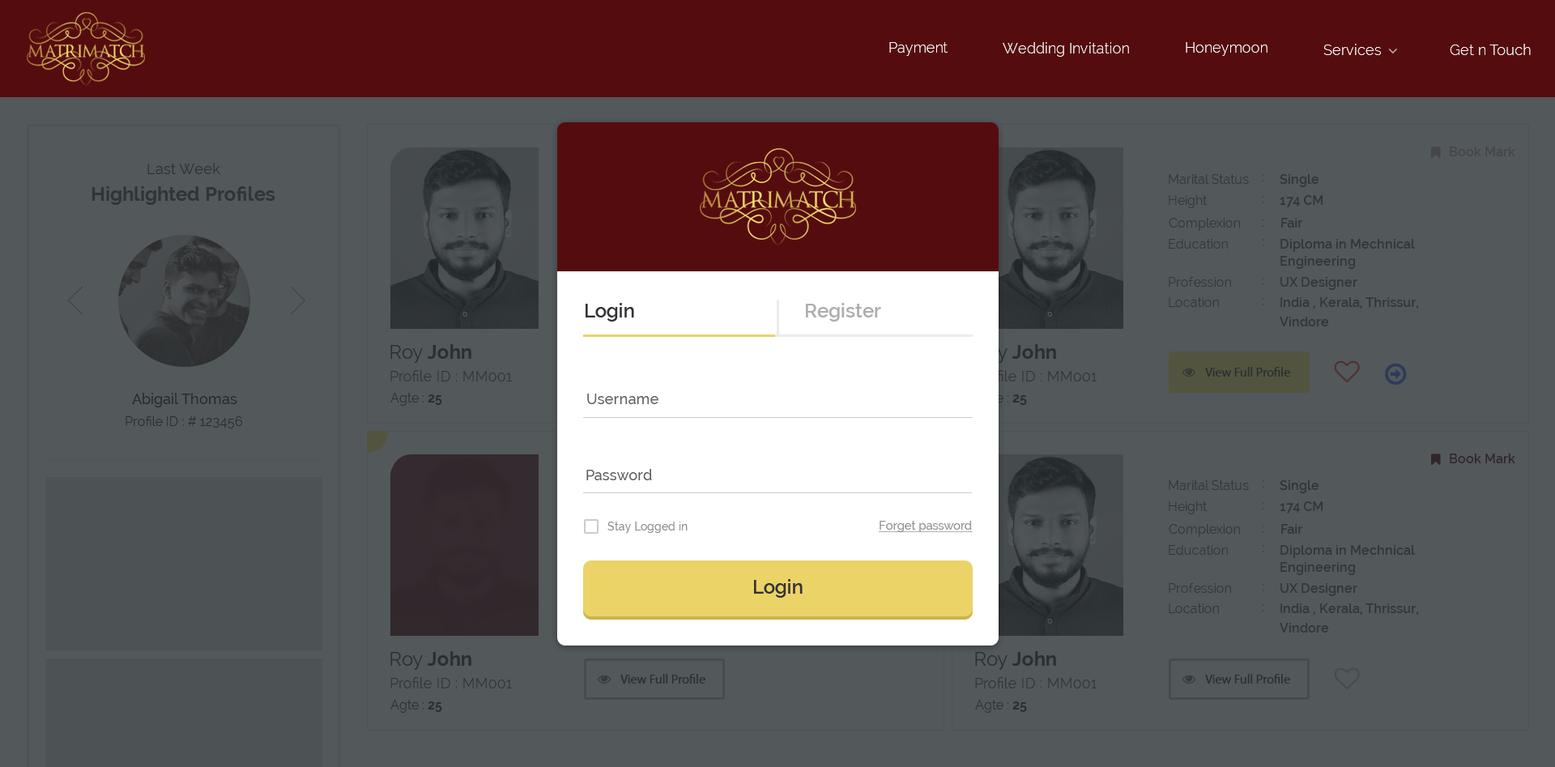
<style>
.page{position:relative;width:1555px;height:767px;background:#53585b}
.page>*{position:absolute;margin:0}
.t1{font:14.6px "Raleway-Light";color:#ffffff}
.t2{font:13px "Raleway-SemiBold";color:#444649}
.t3{font:14.6px "Raleway";color:#333333}
.t4{font:13px "Raleway";color:#313639}
.t5{font:13px "Raleway"}
.t6{font:13px "Raleway-SemiBold";color:#313639}
.t7{font:19.4px "Raleway-Bold";color:#303538}
.t8{font:13px/17px "Raleway-SemiBold";color:#313639}
.t9{font:19.4px "Raleway-SemiBold";color:#333333}
.t10{font:19.4px "Raleway-SemiBold";color:#adadad}
.t11{font:13px/19.4px "Raleway-SemiBold";color:#313639}
.t12{font:19.4px "Raleway-Bold";color:#333333}
.t13{font:19.4px "Raleway";color:#333333}
.t14{font:14.6px "Raleway";color:#313639}
.t15{font:13px "MyriadPro-Regular";color:#333333}
.t16{font:14.6px "Raleway-Medium";color:#202020}
.t17{font:13px "Raleway";color:#333333}
.t18{font:13px "Raleway-Bold";color:#333333}
.t19{font:14.6px "Raleway-Medium";color:#606060}
.t20{font:13px "Raleway";color:#202020}
.t21{font:13px "Raleway-SemiBold";color:#31272b}
.t22{font:11.3px "Raleway-Medium";color:#909090}
.t23{font:12.1px "Raleway-Medium";color:#909090;text-decoration:underline}
</style>
<div class="page">
<p class="t1" style="left:889px;top:42px;width:58px;height:14px">Payment</p>
<p class="t1" style="left:1003px;top:42px;width:126px;height:15px">Wedding Invitation</p>
<p class="t1" style="left:1186px;top:42px;width:81px;height:14px">Honeymoon</p>
<p class="t1" style="left:1323px;top:44px;width:58px;height:11px">Services</p>
<p class="t1" style="left:1450px;top:44px;width:81px;height:11px">Get n Touch</p>
<p class="t2" style="left:1450px;top:147px;width:65px;height:9px">Book Mark</p>
<p class="t3" style="left:147px;top:163px;width:73px;height:11px">Last Week</p>
<p class="t4" style="left:1169px;top:174px;width:80px;height:10px">Marital Status</p>
<p class="t5" style="left:1263px;top:174px;width:0px;height:7px">:</p>
<p class="t6" style="left:1280px;top:174px;width:39px;height:13px">Single</p>
<p class="t7" style="left:92px;top:186px;width:183px;height:19px">Highlighted Profiles</p>
<p class="t4" style="left:1169px;top:195px;width:38px;height:13px">Height</p>
<p class="t5" style="left:1263px;top:196px;width:0px;height:7px">:</p>
<p class="t6" style="left:1280px;top:195px;width:42px;height:12px">174 CM</p>
<p class="t4" style="left:1169px;top:218px;width:71px;height:13px">Complexion</p>
<p class="t5" style="left:1263px;top:219px;width:0px;height:8px">:</p>
<p class="t6" style="left:1281px;top:218px;width:21px;height:10px">Fair</p>
<p class="t4" style="left:1169px;top:239px;width:59px;height:10px">Education</p>
<p class="t5" style="left:1263px;top:239px;width:0px;height:7px">:</p>
<p class="t8" style="left:1280px;top:239px;width:135px;height:30px">Diploma in Mechnical <br>Engineering</p>
<p class="t4" style="left:1169px;top:277px;width:62px;height:10px">Profession</p>
<p class="t5" style="left:1263px;top:278px;width:0px;height:7px">:</p>
<p class="t6" style="left:1280px;top:277px;width:77px;height:13px">UX Designer</p>
<p class="t9" style="left:586px;top:303px;width:48px;height:19px">Login</p>
<p class="t10" style="left:806px;top:303px;width:75px;height:19px">Register</p>
<p class="t4" style="left:1169px;top:297px;width:50px;height:10px">Location</p>
<p class="t5" style="left:1263px;top:298px;width:0px;height:7px">:</p>
<p class="t11" style="left:1280px;top:297px;width:138px;height:29px">India , Kerala, Thrissur,<br>Vindore</p>
<p class="t12" style="left:390px;top:344px;width:81px;height:19px"><span class="t13">Roy </span>John</p>
<p class="t14" style="left:390px;top:370px;width:122px;height:11px">Profile ID : MM001</p>
<p class="t15" style="left:1205px;top:367px;width:85px;height:10px">View Full Profile</p>
<p class="t16" style="left:132px;top:393px;width:105px;height:14px">Abigail Thomas</p>
<p class="t17" style="left:390px;top:393px;width:52px;height:13px">Agte : <span class="t18">25</span></p>
<p class="t19" style="left:587px;top:394px;width:71px;height:10px">Username</p>
<p class="t20" style="left:126px;top:416px;width:116px;height:12px">Profile ID : # 123456</p>
<p class="t21" style="left:1450px;top:454px;width:65px;height:9px">Book Mark</p>
<p class="t19" style="left:586px;top:469px;width:66px;height:11px">Password</p>
<p class="t4" style="left:1169px;top:480px;width:80px;height:10px">Marital Status</p>
<p class="t5" style="left:1263px;top:480px;width:0px;height:8px">:</p>
<p class="t6" style="left:1280px;top:480px;width:39px;height:13px">Single</p>
<p class="t4" style="left:1169px;top:501px;width:38px;height:13px">Height</p>
<p class="t5" style="left:1263px;top:502px;width:0px;height:7px">:</p>
<p class="t6" style="left:1280px;top:501px;width:42px;height:12px">174 CM</p>
<p class="t22" style="left:607px;top:522px;width:81px;height:11px">Stay Logged in</p>
<p class="t23" style="left:879px;top:521px;width:94px;height:11px">Forget password</p>
<p class="t4" style="left:1169px;top:524px;width:71px;height:13px">Complexion</p>
<p class="t5" style="left:1263px;top:526px;width:0px;height:7px">:</p>
<p class="t6" style="left:1281px;top:524px;width:21px;height:10px">Fair</p>
<p class="t4" style="left:1169px;top:545px;width:59px;height:10px">Education</p>
<p class="t5" style="left:1263px;top:545px;width:0px;height:7px">:</p>
<p class="t8" style="left:1280px;top:545px;width:135px;height:30px">Diploma in Mechnical <br>Engineering</p>
<p class="t9" style="left:754px;top:579px;width:49px;height:19px">Login</p>
<p class="t4" style="left:1169px;top:583px;width:62px;height:10px">Profession</p>
<p class="t5" style="left:1263px;top:584px;width:0px;height:7px">:</p>
<p class="t6" style="left:1280px;top:583px;width:77px;height:13px">UX Designer</p>
<p class="t4" style="left:1169px;top:603px;width:50px;height:10px">Location</p>
<p class="t5" style="left:1263px;top:604px;width:0px;height:7px">:</p>
<p class="t11" style="left:1280px;top:603px;width:138px;height:29px">India , Kerala, Thrissur,<br>Vindore</p>
<p class="t12" style="left:390px;top:651px;width:81px;height:19px"><span class="t13">Roy </span>John</p>
<p class="t12" style="left:975px;top:651px;width:81px;height:19px"><span class="t13">Roy </span>John</p>
<p class="t14" style="left:390px;top:677px;width:122px;height:11px">Profile ID : MM001</p>
<p class="t15" style="left:620px;top:674px;width:85px;height:9px">View Full Profile</p>
<p class="t14" style="left:975px;top:677px;width:122px;height:11px">Profile ID : MM001</p>
<p class="t15" style="left:1205px;top:674px;width:85px;height:9px">View Full Profile</p>
<p class="t17" style="left:390px;top:700px;width:52px;height:13px">Agte : <span class="t18">25</span></p>
<p class="t17" style="left:975px;top:700px;width:52px;height:13px">Agte : <span class="t18">25</span></p>
</div>
